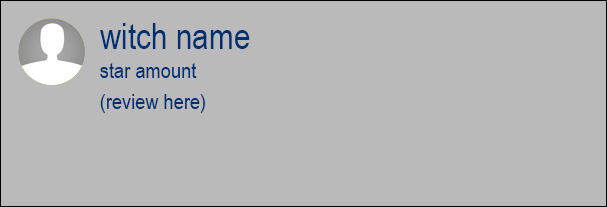
<style>
.page{position:relative;width:607px;height:207px;background:#bababa}
.page>*{position:absolute;margin:0}
.t1{font:36.3px "ArialNarrow";color:#002f72}
.t2{font:22.3px "ArialNarrow";color:#002f72}
.t3{font:21.1px "ArialNarrow";color:#002f72;scale:1.05 1}
</style>
<div class="page">
<p class="t1" style="left:100px;top:23px;width:150px;height:26px">witch name</p>
<p class="t2" style="left:100px;top:63px;width:97px;height:15px">star amount</p>
<p class="t3" style="left:100px;top:94px;width:105px;height:19px">(review here)</p>
</div>
